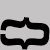
<style>
.page{position:relative;width:50px;height:50px;background:#c5c3c3}
.page>*{position:absolute;margin:0}
.t1{font:61px "MyriadPro-Bold";color:#000000}
</style>
<div class="page">
<p class="t1" style="left:0px;top:17px;width:50px;height:19px;rotate:97deg">{</p>
<p class="t1" style="left:0px;top:34px;width:49px;height:16px;rotate:90deg">}</p>
</div>
